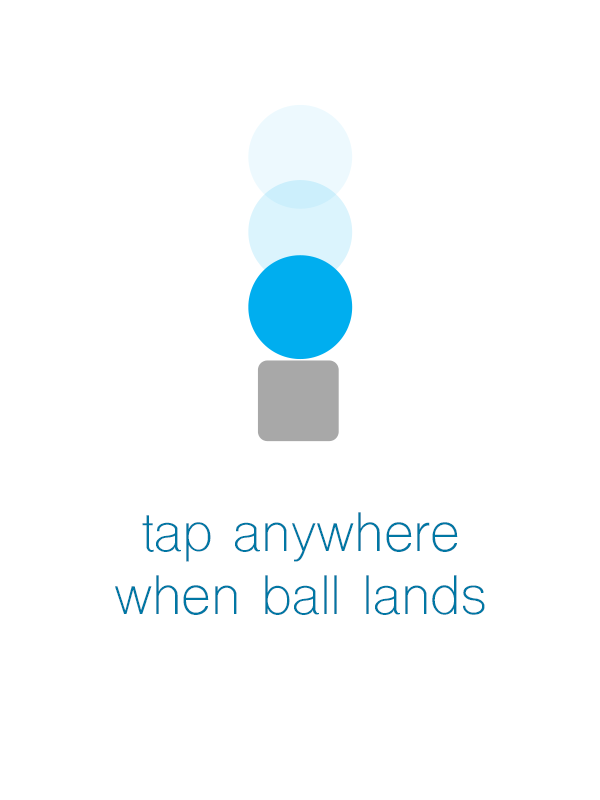
<style>
.page{position:relative;width:600px;height:800px;background:#ffffff}
.page>*{position:absolute;margin:0}
.t1{font:52.4px/63.8px "ShreeDev0714";color:#0077a4}
</style>
<div class="page">
<p class="t1" style="left:115px;top:512px;width:370px;height:103px;text-align:center">tap anywhere<br>when ball lands</p>
</div>
